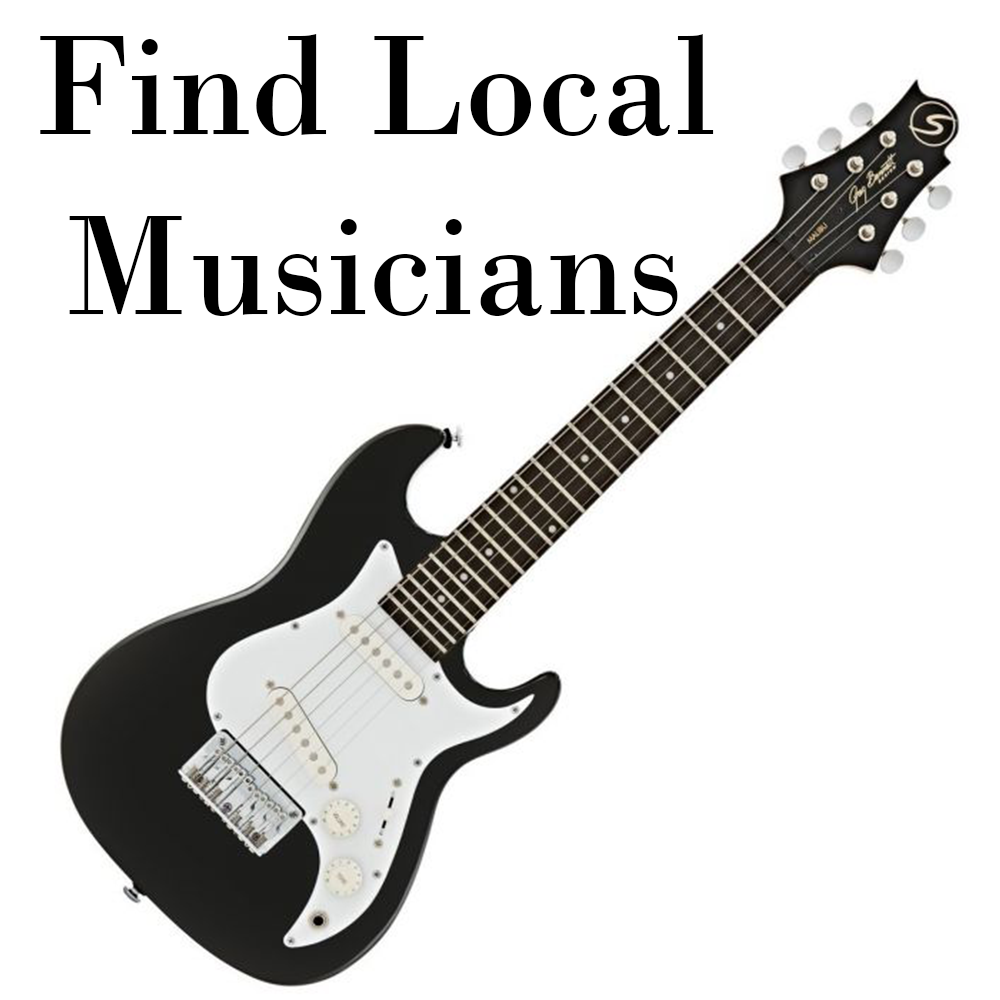
<style>
.page{position:relative;width:1000px;height:1000px;background:#ffffff}
.page>*{position:absolute;margin:0}
.t1{font:150px "BodoniMT";color:#000000}
</style>
<div class="page">
<p class="t1" style="left:40px;top:34px;width:674px;height:282px;text-align:center">Find Local Musicians</p>
</div>
